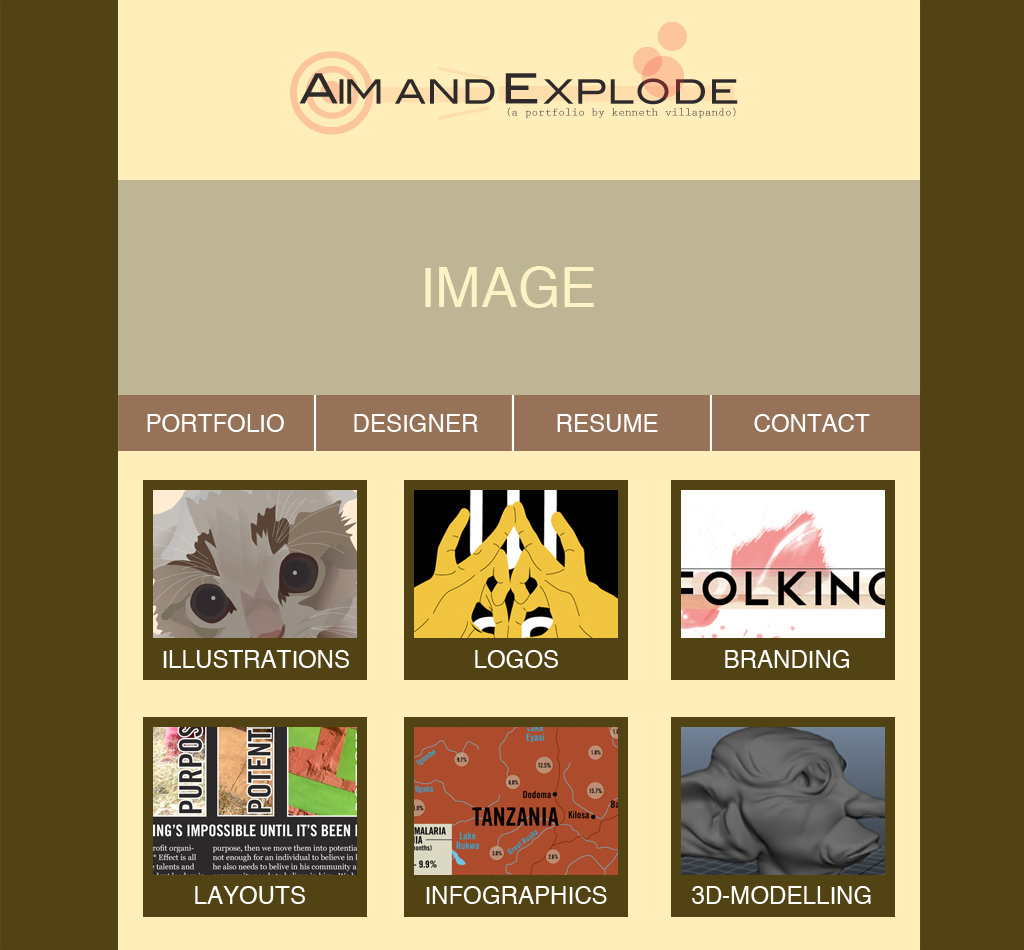
<style>
.page{position:relative;width:1024px;height:950px;background:#514313}
.page>*{position:absolute;margin:0}
.t1{font:54.9px "Helvetica";color:#fff2c7}
.t2{font:24.1px "Helvetica";color:#ffffff}
</style>
<div class="page">
<p class="t1" style="left:425px;top:266px;width:169px;height:42px">IMAGE</p>
<p class="t2" style="left:147px;top:414px;width:137px;height:18px">PORTFOLIO</p>
<p class="t2" style="left:354px;top:414px;width:124px;height:18px">DESIGNER</p>
<p class="t2" style="left:557px;top:414px;width:101px;height:18px">RESUME</p>
<p class="t2" style="left:754px;top:414px;width:116px;height:18px">CONTACT</p>
<p class="t2" style="left:163px;top:650px;width:186px;height:18px">ILLUSTRATIONS</p>
<p class="t2" style="left:475px;top:650px;width:83px;height:18px">LOGOS</p>
<p class="t2" style="left:725px;top:650px;width:124px;height:18px">BRANDING</p>
<p class="t2" style="left:195px;top:886px;width:110px;height:18px">LAYOUTS</p>
<p class="t2" style="left:426px;top:886px;width:181px;height:18px">INFOGRAPHICS</p>
<p class="t2" style="left:692px;top:886px;width:179px;height:18px">3D-MODELLING</p>
</div>
